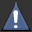
<style>
.page{position:relative;width:32px;height:32px;background:#333333}
.page>*{position:absolute;margin:0}
.t1{font:28px "CourierNewPS-BoldMT";color:#ffffff}
</style>
<div class="page">
<p class="t1" style="left:13px;top:10px;width:5px;height:18px">!</p>
</div>
